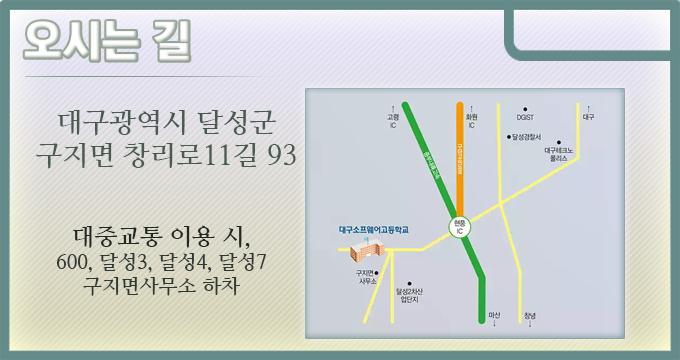
<style>
.page{position:relative;width:680px;height:360px}
.page>*{position:absolute;margin:0}
.t1{font:44px "KoreanTITGD5-R";letter-spacing:-0.01em;color:#ffffff}
.t2{font:28px "NanumMyeongjoBold";letter-spacing:-0.01em;color:#495a4e}
.t3{font:20px "NanumMyeongjoBold";letter-spacing:-0.01em;color:#2f3832}
.t4{font:24px "NanumMyeongjoBold";letter-spacing:-0.01em;color:#212823}
</style>
<div class="page">
<p class="t1" style="left:24px;top:21px;width:166px;height:40px">오시는 길</p>
<p class="t2" style="left:36px;top:110px;width:260px;height:59px;text-align:center">대구광역시 달성군<br>구지면 창리로11길 93</p>
<p class="t3" style="left:56px;top:225px;width:210px;height:71px;text-align:center"><span class="t4">대중교통 이용 시,<br></span>600, 달성3, 달성4, 달성7<br>구지면사무소 하차</p>
</div>
